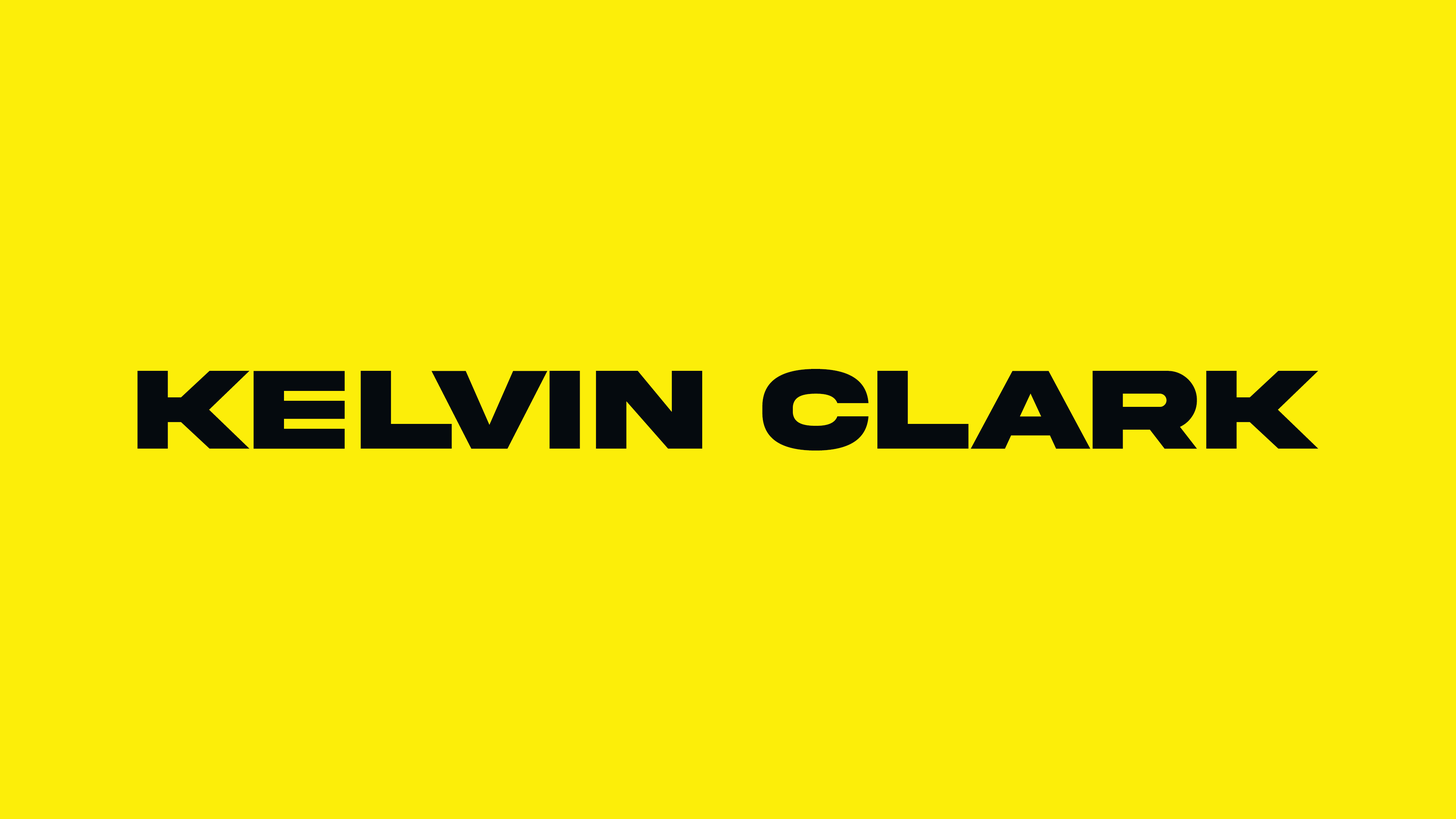
<style>
.page{position:relative;width:1456px;height:819px;background:#fcee09}
.page>*{position:absolute;margin:0}
.t1{font:118.5px "AkiraExpanded-SuperBold";color:#050a0e}
</style>
<div class="page">
<p class="t1" style="left:137px;top:369px;width:1181px;height:82px">KELVIN CLARK</p>
</div>
